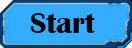
<style>
.page{position:relative;width:132px;height:48px;background:#33adff}
.page>*{position:absolute;margin:0}
.t1{font:30px "BritannicBold";color:#000000}
</style>
<div class="page">
<p class="t1" style="left:30px;top:13px;width:65px;height:20px">Start</p>
</div>
